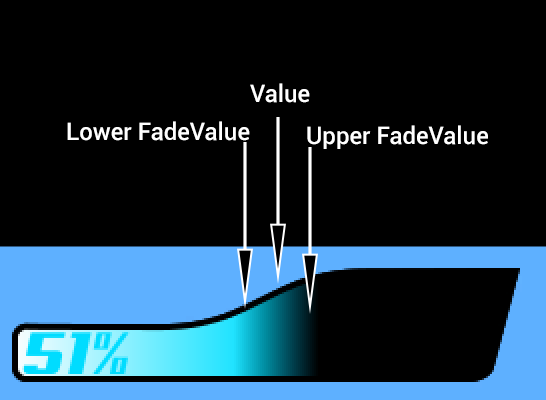
<style>
.page{position:relative;width:546px;height:400px;background:#000000}
.page>*{position:absolute;margin:0}
.t1{font:12px "Roboto-Medium";color:#ffffff}
</style>
<div class="page">
<p class="t1" style="left:250px;top:83px;width:60px;height:20px">Value</p>
<p class="t1" style="left:67px;top:121px;width:183px;height:20px">Lower FadeValue</p>
<p class="t1" style="left:307px;top:125px;width:181px;height:24px">Upper FadeValue</p>
</div>
